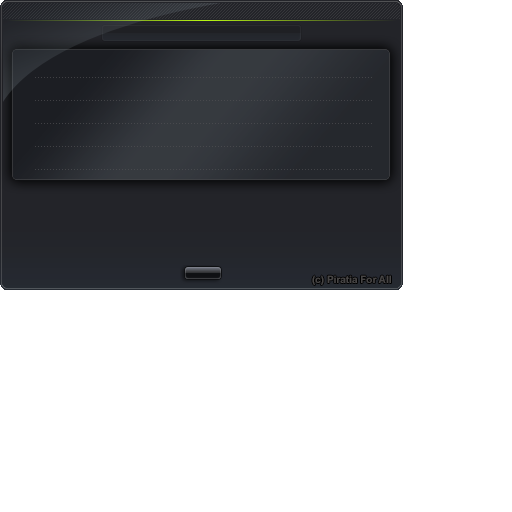
<style>
.page{position:relative;width:512px;height:512px;background:#ffffff}
.page>*{position:absolute;margin:0}
.t1{font:10px "Arial-BoldMT";color:#474545}
</style>
<div class="page">
<p class="t1" style="left:312px;top:275px;width:79px;height:10px">(c) Piratia For All</p>
</div>
